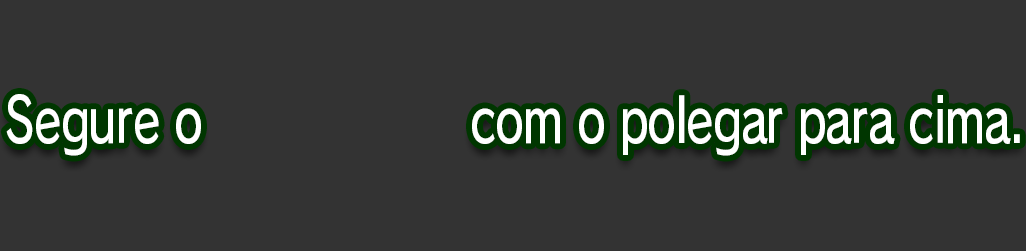
<style>
.page{position:relative;width:1026px;height:251px;background:#333333}
.page>*{position:absolute;margin:0}
.t1{font:61.3px "RodinPro-DB";letter-spacing:-0.022em;color:#ffffff;scale:0.74 1}
.t2{font:69.3px "NewRodinPro-DB";letter-spacing:-0.022em;color:#ffffff;scale:0.74 1}
</style>
<div class="page">
<p class="t1" style="left:6px;top:88px;width:1014px;height:68px">Segure o <span class="t2">Joy-Con</span> com o polegar para cima.</p>
</div>
